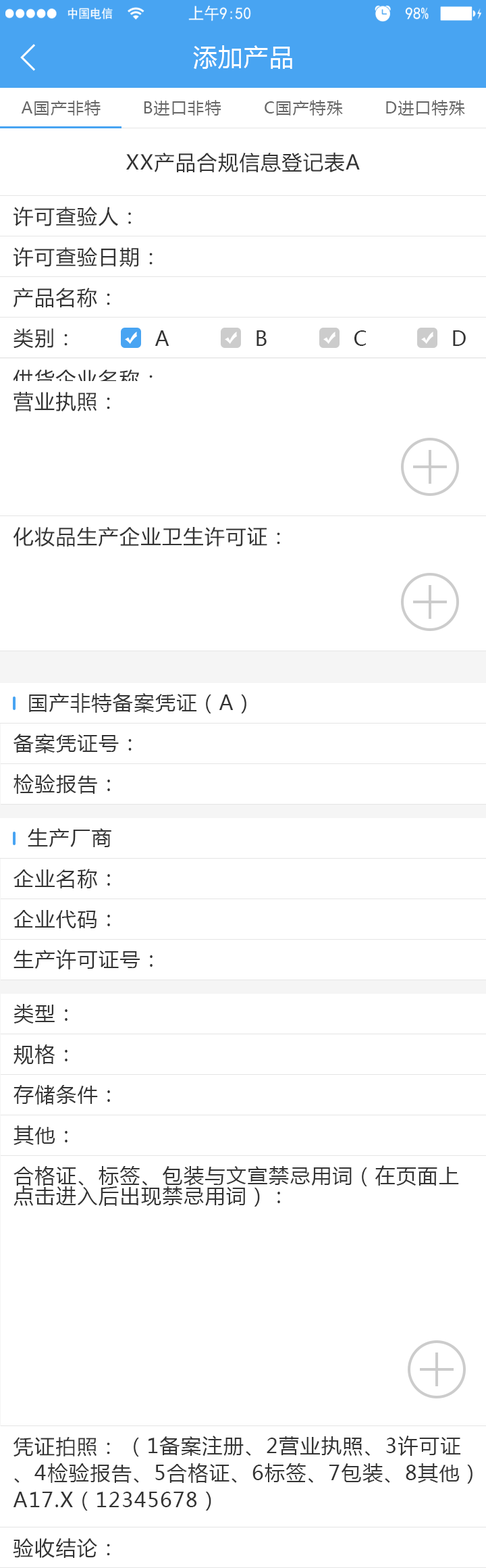
<style>
.page{position:relative;width:486px;height:1568px;background:#ffffff}
.page>*{position:absolute;margin:0}
.t1{font:24.3px "MicrosoftYaHei";letter-spacing:0.05em;color:#ffffff}
.t2{font:16.2px "MicrosoftYaHei";letter-spacing:0.05em;color:#666666}
.t3{font:20.3px "MicrosoftYaHei";letter-spacing:0.05em;color:#333333}
.t4{font:20.3px "MicrosoftYaHei";letter-spacing:0.05em}
.t5{font:20.3px/20.3px "MicrosoftYaHei";letter-spacing:0.05em;color:#333333}
.t6{font:20.3px/27px "MicrosoftYaHei";letter-spacing:0.05em;color:#333333}
</style>
<div class="page">
<p class="t1" style="left:193px;top:45px;width:100px;height:24px">添加产品</p>
<p class="t2" style="left:21px;top:100px;width:80px;height:16px">A国产非特</p>
<p class="t2" style="left:144px;top:100px;width:78px;height:16px">B进口非特</p>
<p class="t2" style="left:265px;top:100px;width:78px;height:16px">C国产特殊</p>
<p class="t2" style="left:386px;top:100px;width:79px;height:16px">D进口特殊</p>
<p class="t3" style="left:126px;top:152px;width:234px;height:20px">XX产品合规信息登记表A</p>
<p class="t3" style="left:14px;top:207px;width:117px;height:19px">许可查验人：</p>
<p class="t3" style="left:14px;top:247px;width:139px;height:21px">许可查验日期：</p>
<p class="t3" style="left:14px;top:288px;width:96px;height:19px">产品名称：</p>
<p class="t3" style="left:14px;top:328px;width:54px;height:21px">类别：</p>
<p class="t3" style="left:155px;top:330px;width:15px;height:16px">A</p>
<p class="t3" style="left:257px;top:330px;width:10px;height:16px">B</p>
<p class="t3" style="left:355px;top:330px;width:11px;height:16px">C</p>
<p class="t3" style="left:453px;top:330px;width:13px;height:16px">D</p>
<p class="t4" style="left:13px;top:370px;width:140px;height:20px">供货企业名称：</p>
<p class="t3" style="left:14px;top:392px;width:96px;height:19px">营业执照：</p>
<p class="t3" style="left:14px;top:527px;width:266px;height:20px">化妆品生产企业卫生许可证：</p>
<p class="t3" style="left:29px;top:693px;width:218px;height:20px">国产非特备案凭证（A）</p>
<p class="t3" style="left:14px;top:734px;width:118px;height:19px">备案凭证号：</p>
<p class="t3" style="left:14px;top:774px;width:96px;height:20px">检验报告：</p>
<p class="t3" style="left:28px;top:828px;width:83px;height:19px">生产厂商</p>
<p class="t3" style="left:14px;top:869px;width:96px;height:19px">企业名称：</p>
<p class="t3" style="left:14px;top:910px;width:96px;height:18px">企业代码：</p>
<p class="t3" style="left:14px;top:949px;width:139px;height:20px">生产许可证号：</p>
<p class="t3" style="left:14px;top:1004px;width:54px;height:19px">类型：</p>
<p class="t3" style="left:14px;top:1044px;width:54px;height:21px">规格：</p>
<p class="t3" style="left:14px;top:1085px;width:96px;height:20px">存储条件：</p>
<p class="t3" style="left:14px;top:1126px;width:54px;height:19px">其他：</p>
<p class="t5" style="left:14px;top:1165px;width:445px;height:42px">合格证、标签、包装与文宣禁忌用词（在页面上<br>点击进入后出现禁忌用词）：</p>
<p class="t6" style="left:13px;top:1436px;width:460px;height:75px">（1备案注册、2营业执照、3许可证、4检验报告、5合格证、6标签、7包装、8其他）A17.X（12345678）</p>
<p class="t3" style="left:14px;top:1436px;width:96px;height:21px">凭证拍照：</p>
<p class="t3" style="left:13px;top:1538px;width:97px;height:20px">验收结论：</p>
</div>
